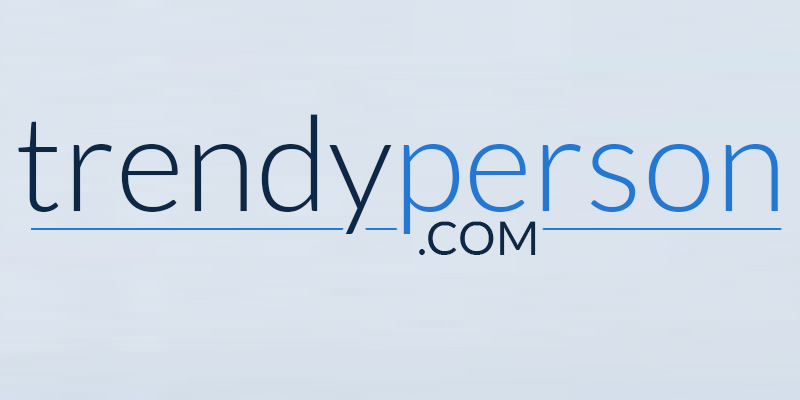
<style>
.page{position:relative;width:800px;height:400px}
.page>*{position:absolute;margin:0}
.t1{font:133.5px "Lato-Light";color:#0c2846}
.t2{font:133.5px "Lato-Light";color:#2478d2}
.t3{font:47.5px "Lato-Regular";color:#0c2846}
</style>
<div class="page">
<p class="t1" style="left:18px;top:114px;width:760px;height:120px">trendy<span class="t2">person</span></p>
<p class="t3" style="left:419px;top:221px;width:117px;height:34px">.COM</p>
</div>
